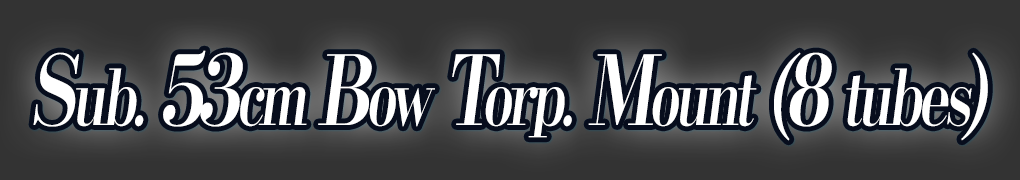
<style>
.page{position:relative;width:1020px;height:180px;background:#333333}
.page>*{position:absolute;margin:0}
.t1{font:76.8px "KochoStd-Heavy";letter-spacing:-0.08em;color:#ffffff;font-style:italic;scale:0.73 1}
.t2{font:96px "KochoStd-Heavy";letter-spacing:-0.08em;color:#ffffff;font-style:italic;scale:0.73 1}
</style>
<div class="page">
<p class="t1" style="left:33px;top:50px;width:955px;height:91px"><span class="t2">S</span>ub.<span class="t2"> 53</span>cm <span class="t2">B</span>ow<span class="t2"> T</span>orp.<span class="t2"> M</span>ount<span class="t2"> (8 </span>tubes<span class="t2">)</span></p>
</div>
